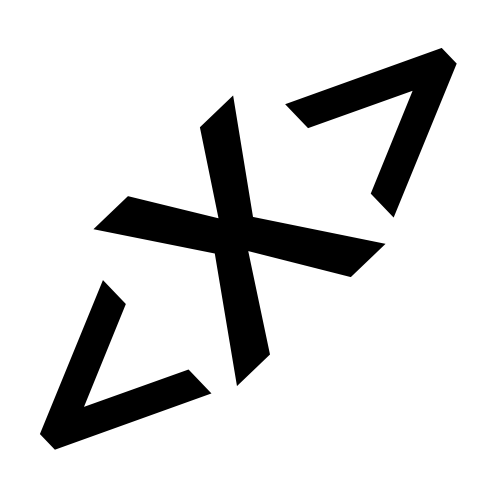
<style>
.page{position:relative;width:500px;height:500px;background:#ffffff}
.page>*{position:absolute;margin:0}
.t1{font:300px "Avenir-Heavy";color:#000000}
</style>
<div class="page">
<p class="t1" style="left:39px;top:47px;width:418px;height:403px;rotate:-44deg">&lt;X&gt;</p>
</div>
